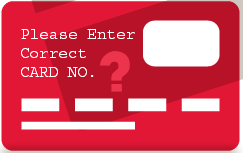
<style>
.page{position:relative;width:243px;height:153px;background:#e21736}
.page>*{position:absolute;margin:0}
.t1{font:16px "Courier";color:#ffffff}
</style>
<div class="page">
<p class="t1" style="left:21px;top:29px;width:114px;height:48px">Please Enter <br>Correct<br>CARD NO.</p>
</div>
